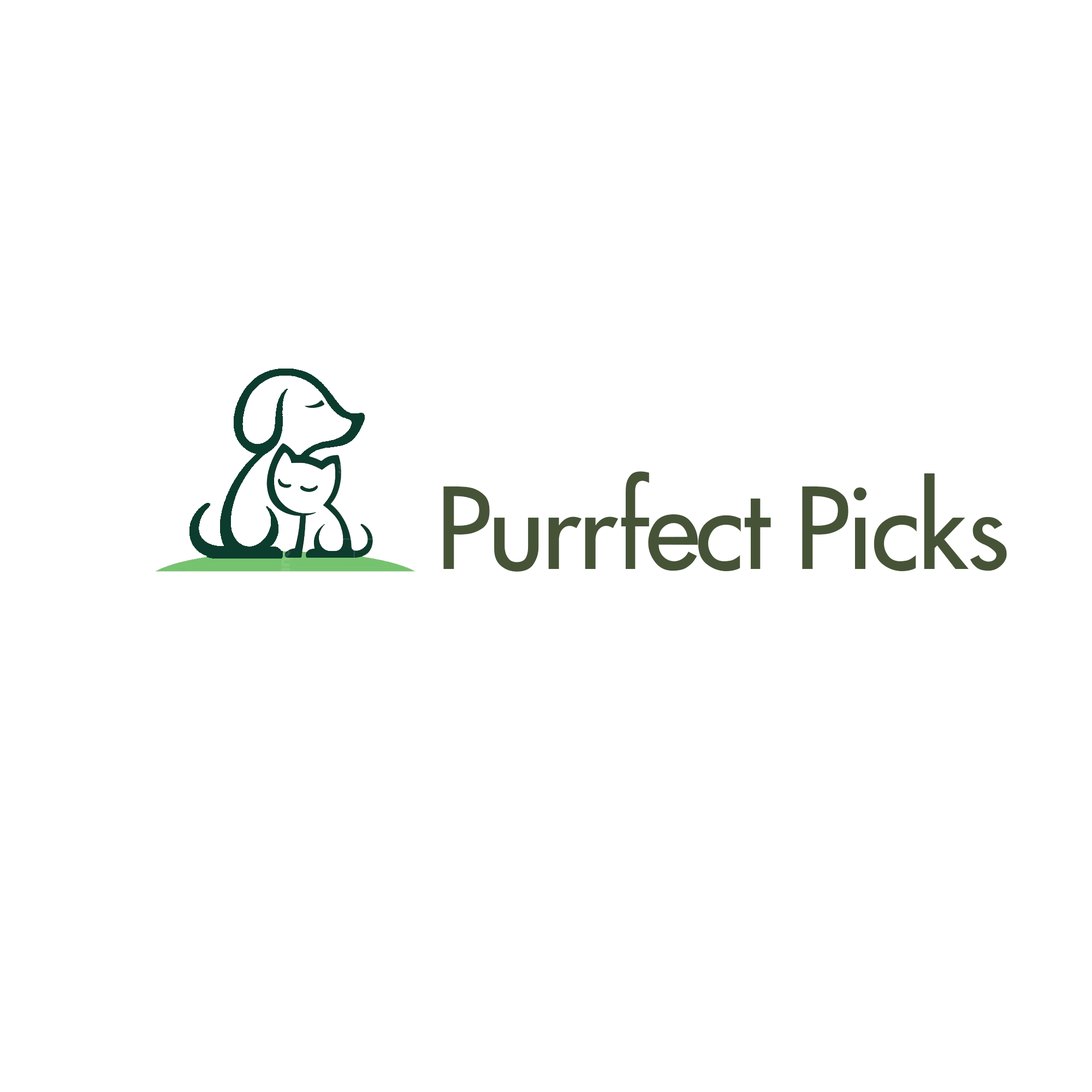
<style>
.page{position:relative;width:1092px;height:1092px;background:#ffffff}
.page>*{position:absolute;margin:0}
.t1{font:110.1px "Futura2-Normal";letter-spacing:-0.024em;color:#465337}
</style>
<div class="page">
<p class="t1" style="left:443px;top:471px;width:564px;height:101px">Purrfect Picks</p>
</div>
